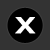
<style>
.page{position:relative;width:50px;height:50px;background:#333333}
.page>*{position:absolute;margin:0}
.t1{font:32px "MyriadPro-Regular";color:#ffffff;font-weight:bold;scale:1.33 1}
</style>
<div class="page">
<p class="t1" style="left:15px;top:17px;width:21px;height:17px">x</p>
</div>
